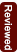
<style>
.page{position:relative;width:17px;height:52px;background:#650701}
.page>*{position:absolute;margin:0}
.t1{font:10px "ArialMT";letter-spacing:0.025em;color:#ffffff}
</style>
<div class="page">
<p class="t1" style="left:4px;top:5px;width:8px;height:45px;rotate:90deg">Reviewed</p>
</div>
